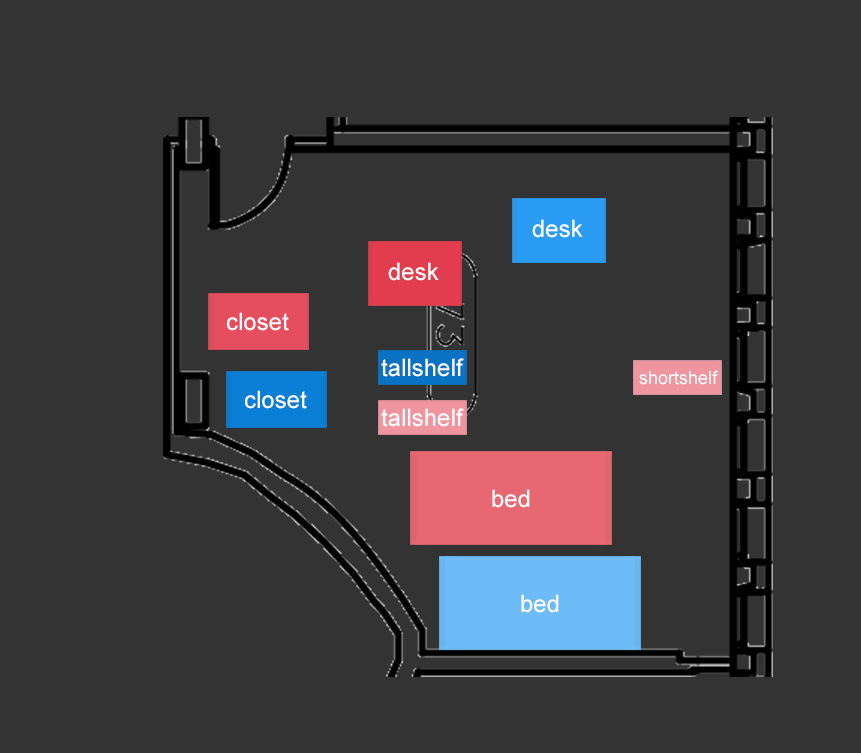
<style>
.page{position:relative;width:861px;height:753px;background:#333333}
.page>*{position:absolute;margin:0}
.t1{font:24px "ArialMT";color:#ffffff}
.t2{font:18px "ArialMT";color:#ffffff}
</style>
<div class="page">
<p class="t1" style="left:532px;top:219px;width:51px;height:19px">desk</p>
<p class="t1" style="left:388px;top:262px;width:51px;height:19px">desk</p>
<p class="t1" style="left:227px;top:312px;width:62px;height:19px">closet</p>
<p class="t1" style="left:381px;top:358px;width:83px;height:19px">tallshelf</p>
<p class="t2" style="left:639px;top:370px;width:79px;height:15px">shortshelf</p>
<p class="t2" style="left:639px;top:370px;width:79px;height:15px">shortshelf</p>
<p class="t1" style="left:245px;top:390px;width:62px;height:19px">closet</p>
<p class="t1" style="left:381px;top:408px;width:83px;height:19px">tallshelf</p>
<p class="t1" style="left:492px;top:489px;width:38px;height:19px">bed</p>
<p class="t1" style="left:521px;top:594px;width:38px;height:19px">bed</p>
</div>
